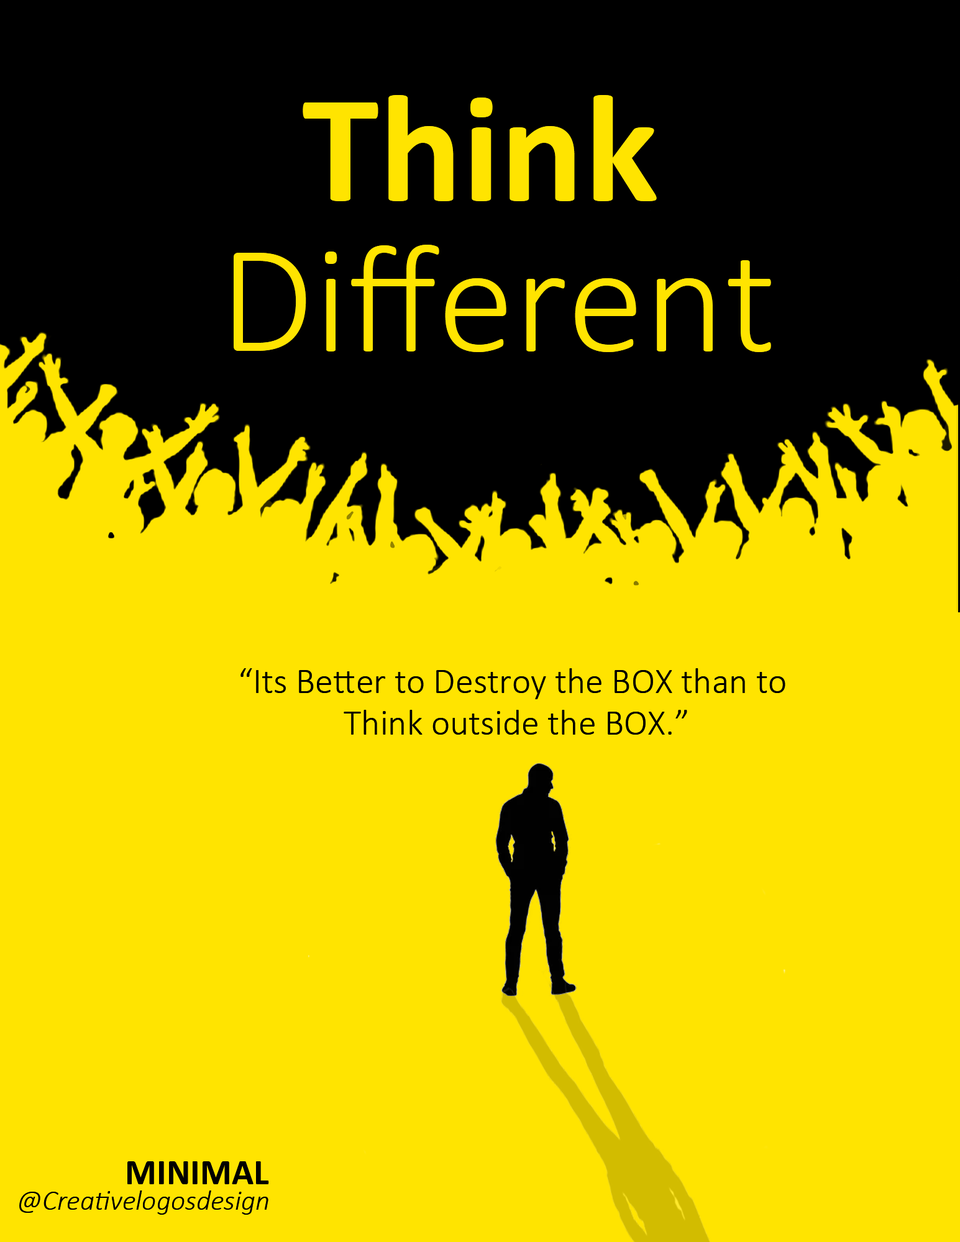
<style>
.page{position:relative;width:960px;height:1242px;background:#ffe400}
.page>*{position:absolute;margin:0}
.t1{font:155.3px/150.1px "Calibri-Light";color:#ffe400}
.t2{font:155.3px/150.1px "Calibri-Bold";color:#ffe400}
.t3{font:36.2px/41.4px "Calibri-Light";color:#000000}
.t4{font:36.2px "Calibri-Bold";color:#000000;text-transform:uppercase}
.t5{font:28.5px "Calibri-LightItalic";color:#000000}
</style>
<div class="page">
<p class="t1" style="left:234px;top:95px;width:537px;height:257px;text-align:center"><span class="t2">Think <br></span>Different</p>
<p class="t3" style="left:240px;top:668px;width:545px;height:67px;text-align:center">“Its Better to Destroy the BOX than to <br>Think outside the BOX.”</p>
<p class="t4" style="left:127px;top:1162px;width:142px;height:23px">Minimal</p>
<p class="t5" style="left:19px;top:1191px;width:249px;height:24px">@Creativelogosdesign</p>
</div>
